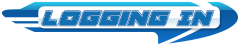
<style>
.page{position:relative;width:240px;height:46px;background:#ffffff}
.page>*{position:absolute;margin:0}
.t1{font:26.9px "AircruiserAcademyItalic";color:#126fb2}
</style>
<div class="page">
<p class="t1" style="left:41px;top:10px;width:174px;height:17px">Logging In</p>
</div>
